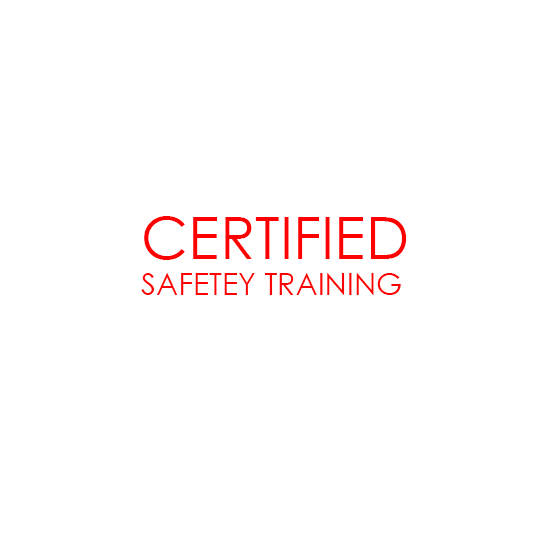
<style>
.page{position:relative;width:550px;height:550px;background:#ffffff}
.page>*{position:absolute;margin:0}
.t1{font:30.2px "CenturyGothic";color:#ff0000}
.t2{font:58.3px "CenturyGothic";color:#ff0000}
</style>
<div class="page">
<p class="t1" style="left:141px;top:216px;width:266px;height:79px;text-align:right"><span class="t2">CERTIFIED<br></span>SAFETEY TRAINING</p>
</div>
